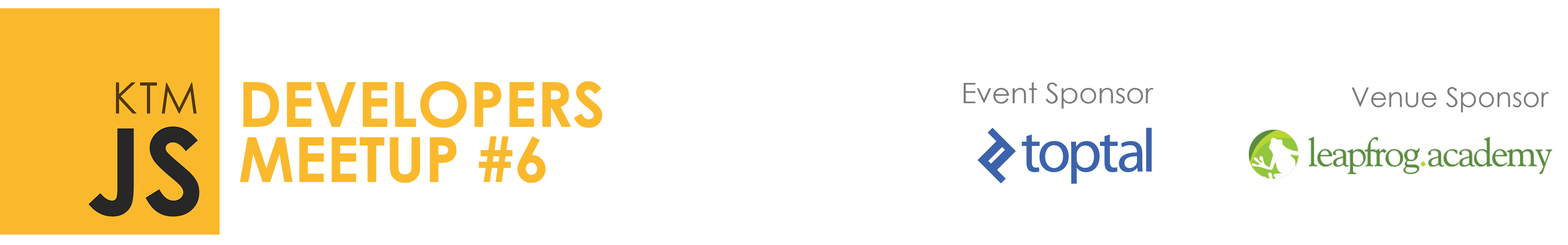
<style>
.page{position:relative;width:1568px;height:245px;background:#ffffff}
.page>*{position:absolute;margin:0}
.t1{font:62.2px/55.3px "CenturyGothic-Bold";color:#fab92d}
.t2{font:28.1px "CenturyGothic";color:#7c7c7c}
.t3{font:26.8px "CenturyGothic";color:#7c7c7c}
</style>
<div class="page">
<p class="t1" style="left:240px;top:81px;width:362px;height:102px">DEVELOPERS<br>MEETUP #6</p>
<p class="t2" style="left:964px;top:82px;width:190px;height:27px">Event Sponsor</p>
<p class="t3" style="left:1352px;top:87px;width:197px;height:25px">Venue Sponsor</p>
</div>
